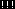
<style>
.page{position:relative;width:15px;height:9px;background:#000000}
.page>*{position:absolute;margin:0}
.t1{font:10px "AndaleMono";letter-spacing:-0.075em;color:#ffffff}
</style>
<div class="page">
<p class="t1" style="left:2px;top:1px;width:11px;height:7px">!!!</p>
</div>
